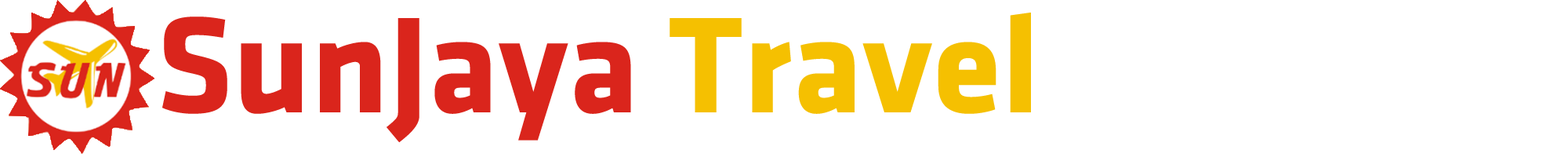
<style>
.page{position:relative;width:1568px;height:154px;background:#ffffff}
.page>*{position:absolute;margin:0}
.t1{font:141.1px "KlavikaBold-Bold";color:#da251c}
.t2{font:141.1px "KlavikaBold-Bold";color:#f5c001}
</style>
<div class="page">
<p class="t1" style="left:162px;top:13px;width:869px;height:129px">SunJaya <span class="t2">Travel</span></p>
</div>
